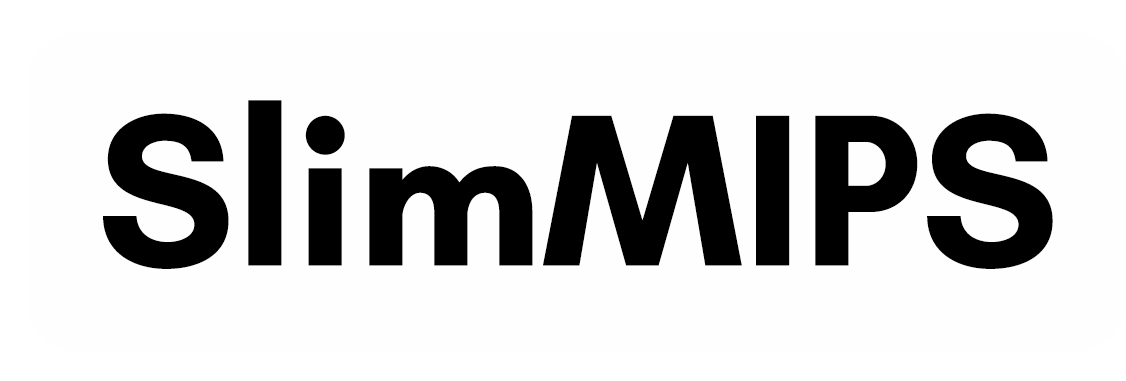
<style>
.page{position:relative;width:1126px;height:381px;background:#fefefe}
.page>*{position:absolute;margin:0}
.t1{font:220px "GlacialIndifference-Bold";color:#000000}
</style>
<div class="page">
<p class="t1" style="left:103px;top:100px;width:950px;height:169px">SlimMIPS</p>
</div>
